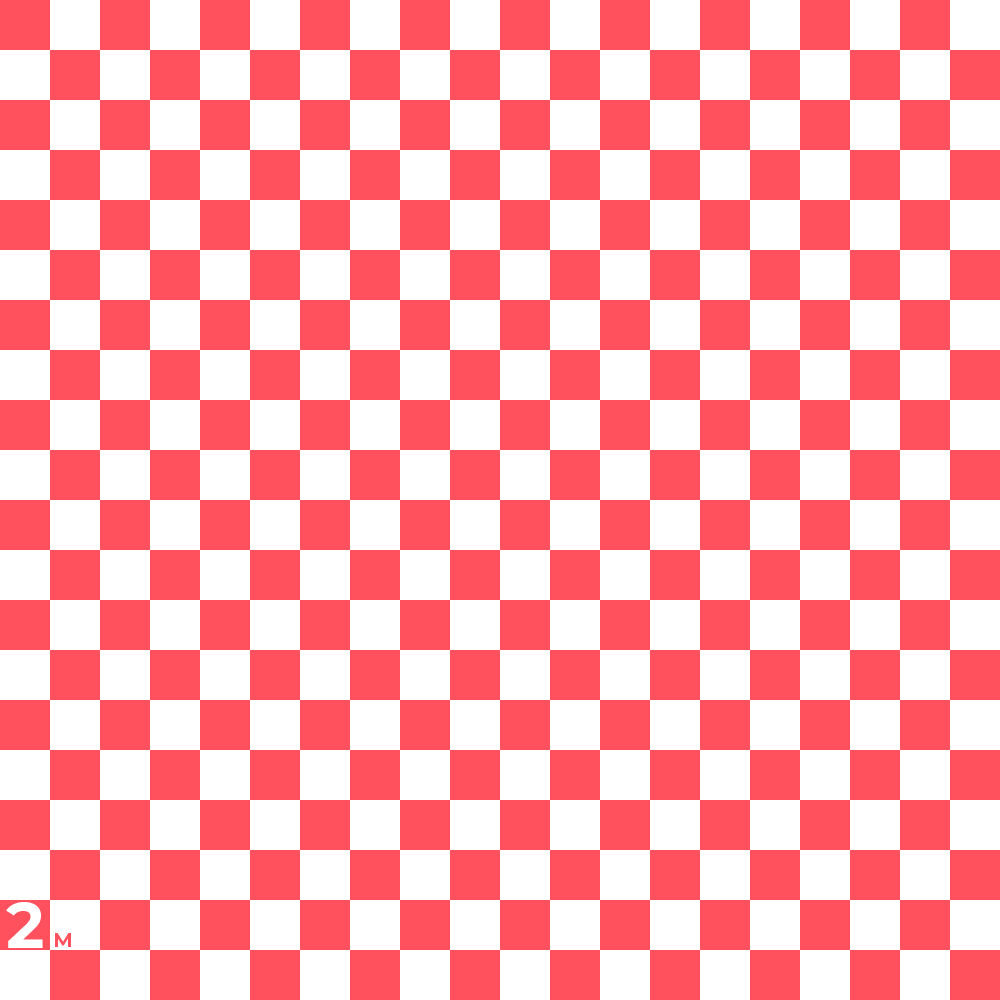
<style>
.page{position:relative;width:1000px;height:1000px;background:#ffffff}
.page>*{position:absolute;margin:0}
.t1{font:65px "Montserrat-Bold";letter-spacing:0.075em;color:#ffffff;text-transform:uppercase}
.t2{font:20px "Montserrat-Bold";letter-spacing:0.075em;color:#ff515d;text-transform:uppercase}
</style>
<div class="page">
<p class="t1" style="left:6px;top:902px;width:37px;height:46px">2</p>
<p class="t2" style="left:55px;top:933px;width:16px;height:14px">m</p>
</div>
